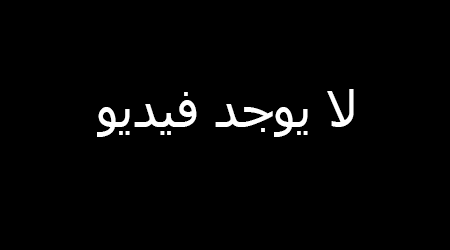
<style>
.page{position:relative;width:450px;height:250px;background:#000000}
.page>*{position:absolute;margin:0}
.t1{font:12px "Tahoma";color:#ffffff}
</style>
<div class="page">
<p class="t1" style="left:97px;top:89px;width:257px;height:48px">لا يوجد فيديو</p>
</div>
